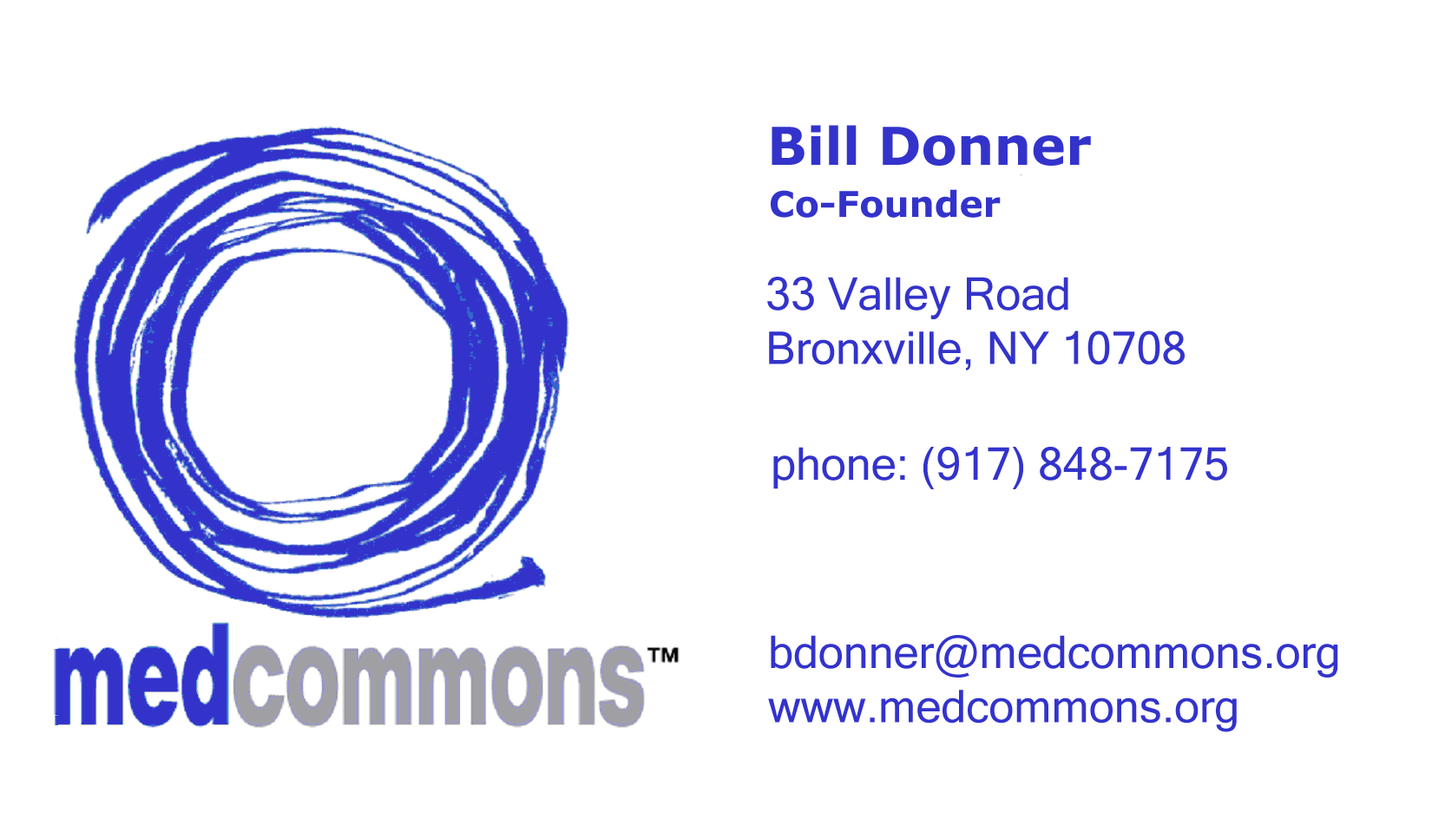
<style>
.page{position:relative;width:1445px;height:825px;background:#ffffff}
.page>*{position:absolute;margin:0}
.t1{font:52.1px "Verdana-Bold";color:#3333cc}
.t2{font:35.6px "Verdana-Bold";color:#3333cc}
.t3{font:45.1px "MicrosoftSansSerif";color:#3333cc}
</style>
<div class="page">
<p class="t1" style="left:771px;top:125px;width:320px;height:41px">Bill Donner</p>
<p class="t2" style="left:771px;top:189px;width:230px;height:29px">Co-Founder</p>
<p class="t3" style="left:767px;top:277px;width:418px;height:94px">33 Valley Road<br>Bronxville, NY 10708</p>
<p class="t3" style="left:773px;top:447px;width:454px;height:42px">phone: (917) 848-7175</p>
<p class="t3" style="left:768px;top:635px;width:570px;height:97px">bdonner@medcommons.org<br>www.medcommons.org</p>
</div>
